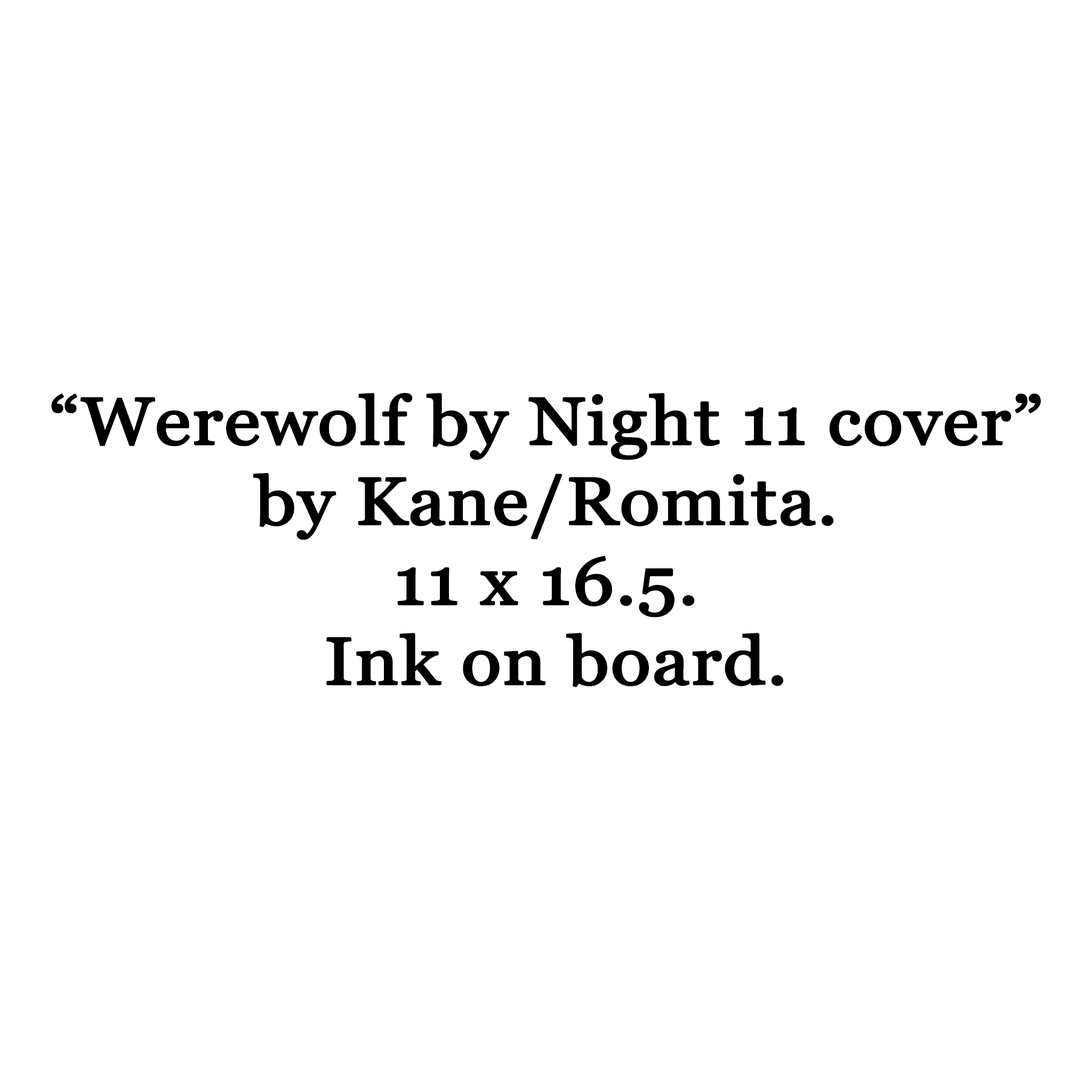
<style>
.page{position:relative;width:1092px;height:1092px;background:#ffffff}
.page>*{position:absolute;margin:0}
.t1{font:66.6px "Georgia";color:#000000;font-weight:bold;scale:1.1 1}
</style>
<div class="page">
<p class="t1" style="left:51px;top:393px;width:990px;height:294px;text-align:center">“Werewolf by Night 11 cover” <br>by Kane/Romita. <br>11 x 16.5.<br> Ink on board. <br>Date unknown.</p>
</div>
